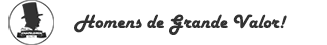
<style>
.page{position:relative;width:327px;height:45px;background:#ffffff}
.page>*{position:absolute;margin:0}
.t1{font:19.6px "HarlowSolid";color:#323232}
</style>
<div class="page">
<p class="t1" style="left:74px;top:14px;width:213px;height:21px">Homens de Grande Valor!</p>
</div>
